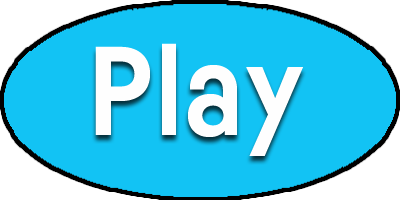
<style>
.page{position:relative;width:400px;height:200px;background:#12c3f4}
.page>*{position:absolute;margin:0}
.t1{font:125px "Fabrikat-Bold";letter-spacing:0.01em;color:#fefefe}
</style>
<div class="page">
<p class="t1" style="left:95px;top:43px;width:208px;height:113px">Play</p>
</div>
